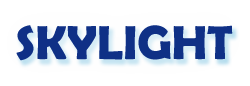
<style>
.page{position:relative;width:250px;height:86px;background:#ffffff}
.page>*{position:absolute;margin:0}
.t1{font:48px "BerlinSansFBDemi-Bold";color:#0f3086}
</style>
<div class="page">
<p class="t1" style="left:16px;top:25px;width:217px;height:36px">SKYLIGHT</p>
</div>
